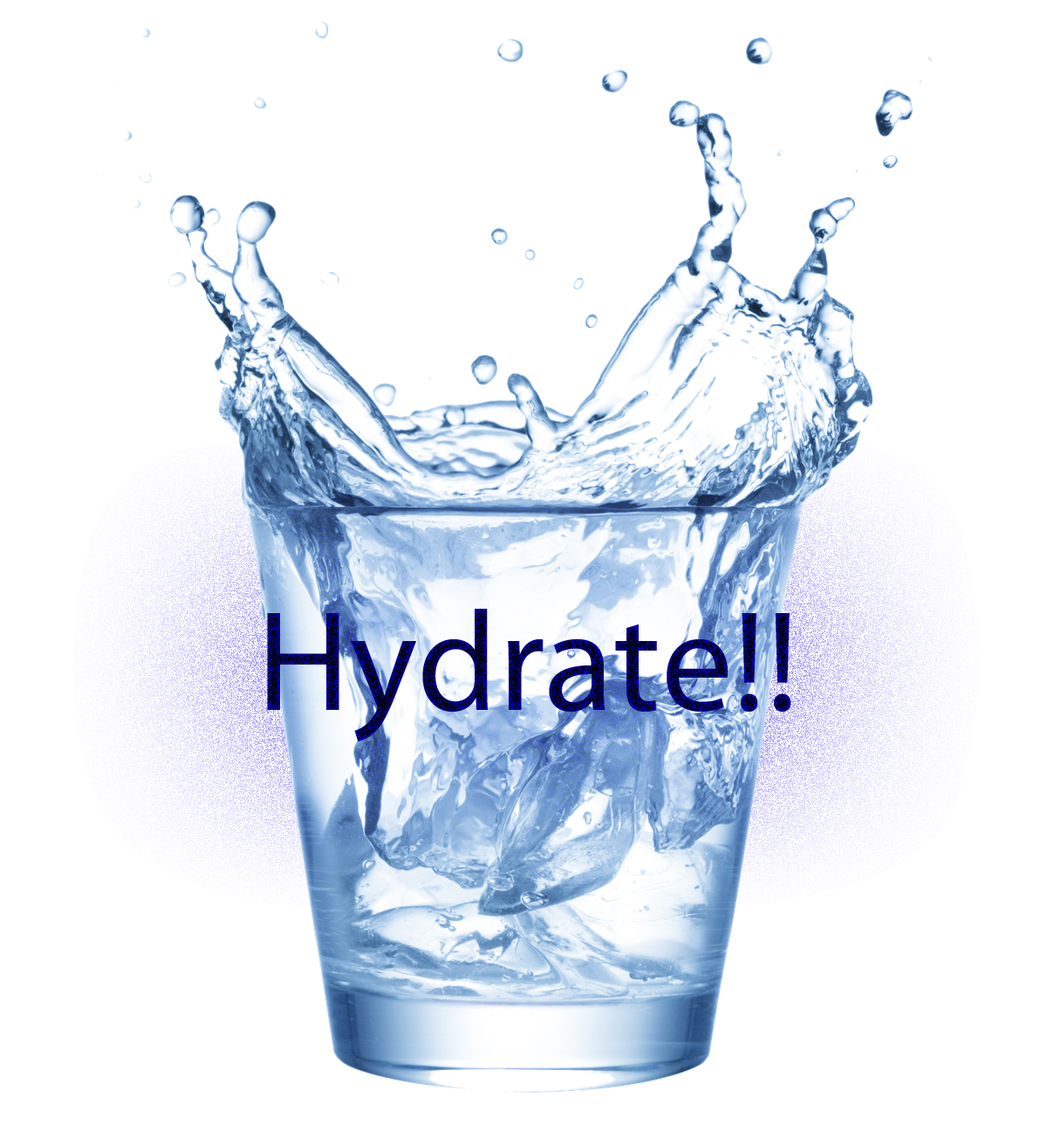
<style>
.page{position:relative;width:1047px;height:1139px;background:#ffffff}
.page>*{position:absolute;margin:0}
.t1{font:143.1px "MyriadPro-Regular"}
</style>
<div class="page">
<p class="t1" style="left:267px;top:609px;width:524px;height:132px">Hydrate!!</p>
</div>
